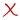
<style>
.page{position:relative;width:20px;height:20px;background:#ffffff}
.page>*{position:absolute;margin:0}
.t1{font:24px "BradleyHandITC";color:#be1010}
</style>
<div class="page">
<p class="t1" style="left:2px;top:3px;width:16px;height:15px">X</p>
</div>
